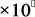
<style>
.page{position:relative;width:35px;height:17px;background:#ffffff}
.page>*{position:absolute;margin:0}
.t1{font:18px "TimesNewRomanPSMT";color:#000000;font-weight:bold;scale:1.08 1}
</style>
<div class="page">
<p class="t1" style="left:0px;top:3px;width:31px;height:14px">×10</p>
</div>
